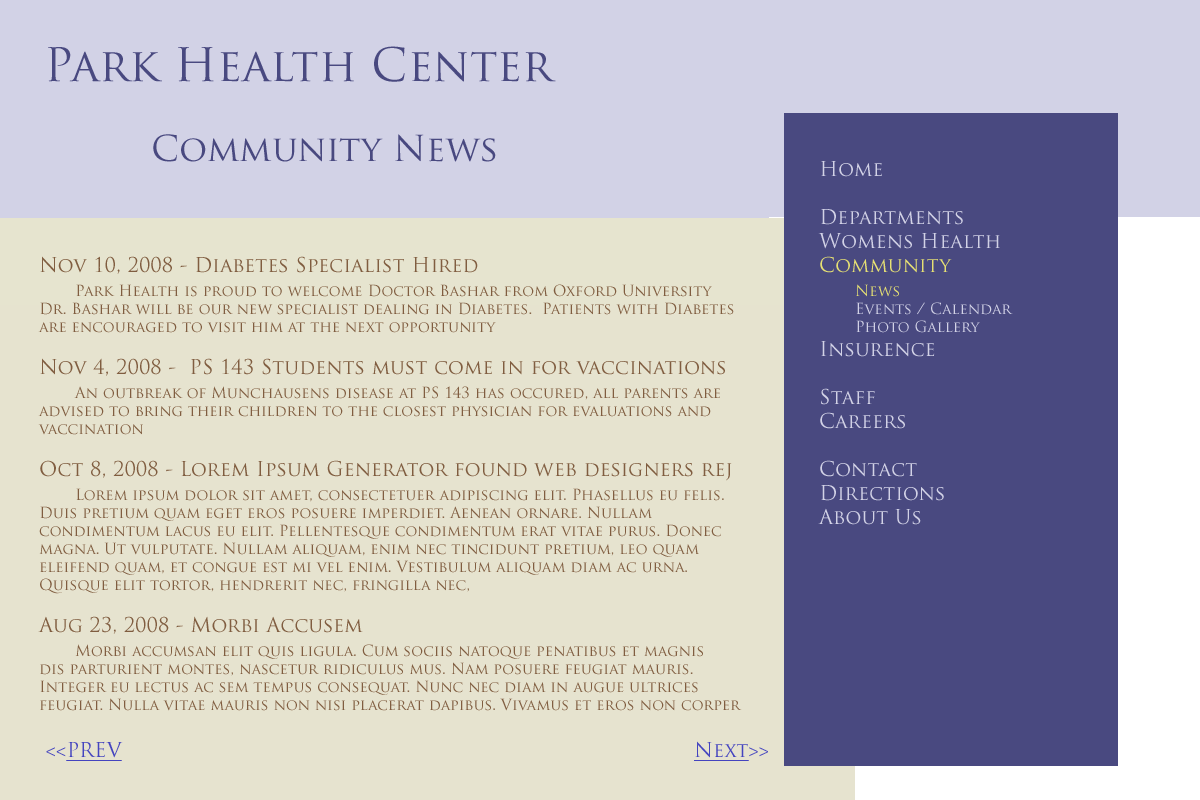
<style>
.page{position:relative;width:1200px;height:800px;background:#e6e3cf}
.page>*{position:absolute;margin:0}
.t1{font:45px "TrajanPro-Regular";color:#494980}
.t2{font:35px "TrajanPro-Regular";color:#494980}
.t3{font:20px "TrajanPro-Regular";color:#d2d2e6}
.t4{font:20px "TrajanPro-Regular";color:#e6e073}
.t5{font:15px "TrajanPro-Regular";color:#e6e073}
.t6{font:15px "TrajanPro-Regular";color:#d2d2e6}
.t7{font:15px "TrajanPro-Regular";color:#805d40}
.t8{font:20px "TrajanPro-Regular";color:#805d40}
.t9{font:20px "TrajanPro-Regular";color:#4444bf;text-decoration:underline}
.t10{font:20px "TrajanPro-Regular";color:#4444bf}
</style>
<div class="page">
<p class="t1" style="left:48px;top:46px;width:508px;height:36px">Park Health Center</p>
<p class="t2" style="left:153px;top:134px;width:343px;height:28px">Community News</p>
<p class="t3" style="left:818px;top:161px;width:195px;height:364px">Home<br><br>Departments<br>Womens Health<br><span class="t4">Community<br> </span><span class="t5">News<br></span><span class="t6"> Events / Calendar<br> Photo Gallery<br></span>Insurence<br><br>Staff<br>Careers<br><br>Contact<br>Directions<br>About Us</p>
<p class="t7" style="left:38px;top:256px;width:704px;height:455px"><span class="t8">Nov 10, 2008 - Diabetes Specialist Hired<br> </span>Park Health is proud to welcome Doctor Bashar from Oxford University<br>Dr. Bashar will be our new specialist dealing in Diabetes.  Patients with Diabetes<br>are encouraged to visit him at the next opportunity<br><br><span class="t8">Nov 4, 2008 -  PS 143 Students must come in for vaccinations<br> </span>An outbreak of Munchausens disease at PS 143 has occured, all parents are<br>advised to bring their children to the closest physician for evaluations and<br>vaccination<br><br><span class="t8">Oct 8, 2008 - Lorem Ipsum Generator found web designers rej<br> </span>Lorem ipsum dolor sit amet, consectetuer adipiscing elit. Phasellus eu felis. <br>Duis pretium quam eget eros posuere imperdiet. Aenean ornare. Nullam <br>condimentum lacus eu elit. Pellentesque condimentum erat vitae purus. Donec <br>magna. Ut vulputate. Nullam aliquam, enim nec tincidunt pretium, leo quam <br>eleifend quam, et congue est mi vel enim. Vestibulum aliquam diam ac urna. <br>Quisque elit tortor, hendrerit nec, fringilla nec,<br><br><span class="t8">Aug 23, 2008 - Morbi Accusem<br> </span>Morbi accumsan elit quis ligula. Cum sociis natoque penatibus et magnis <br>dis parturient montes, nascetur ridiculus mus. Nam posuere feugiat mauris. <br>Integer eu lectus ac sem tempus consequat. Nunc nec diam in augue ultrices <br>feugiat. Nulla vitae mauris non nisi placerat dapibus. Vivamus et eros non corper</p>
<p class="t9" style="left:46px;top:741px;width:722px;height:20px"><span class="t10">&lt;&lt;</span>PREV                Next<span class="t10">&gt;&gt;</span></p>
</div>
